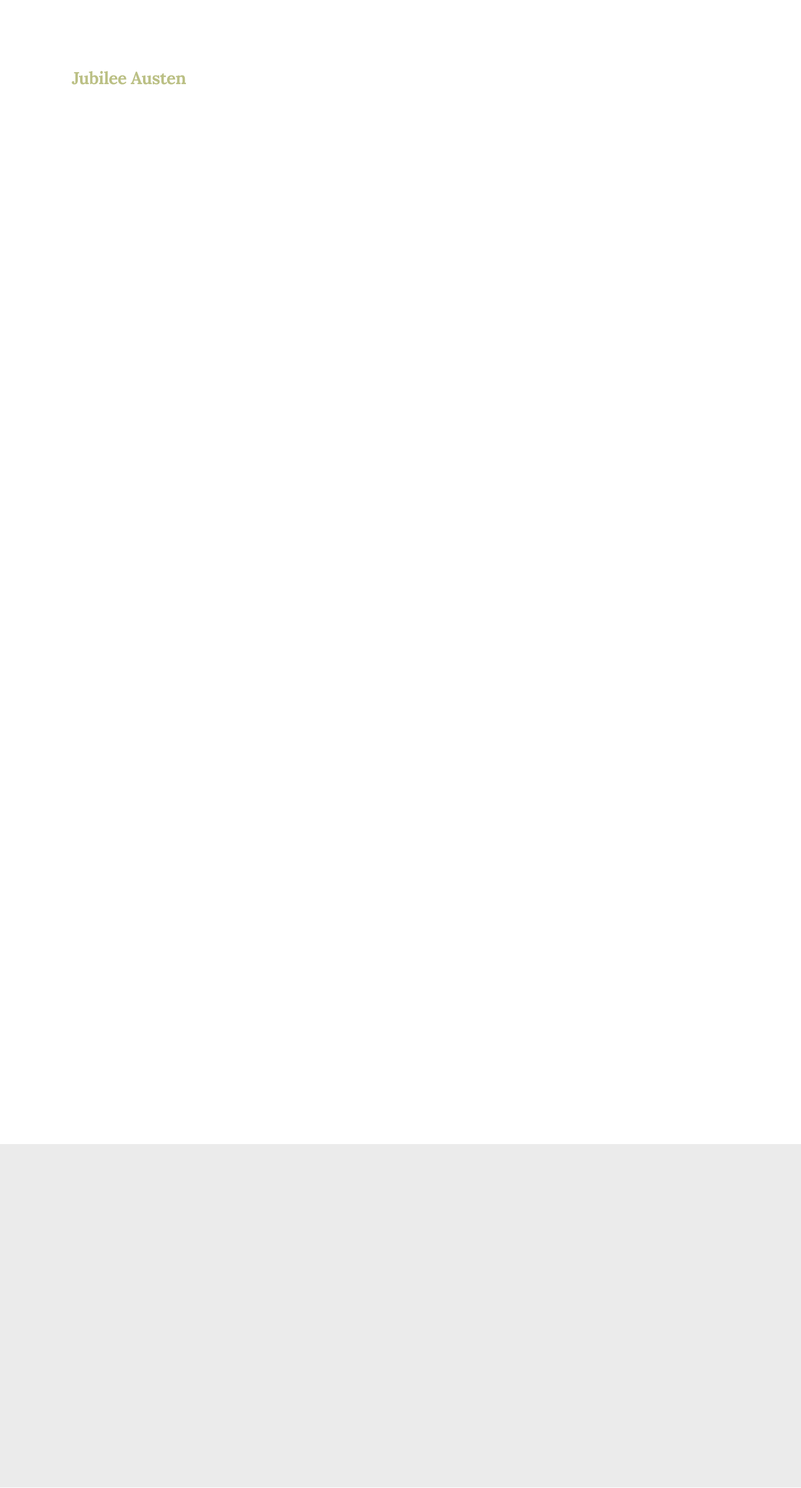
<style>
.page{position:relative;width:801px;height:1488px;background:#ffffff}
.page>*{position:absolute;margin:0}
.t1{font:17.2px "Lora-Bold";letter-spacing:-0.02em;color:#bbc085}
</style>
<div class="page">
<p class="t1" style="left:72px;top:71px;width:114px;height:14px">Jubilee Austen</p>
</div>
